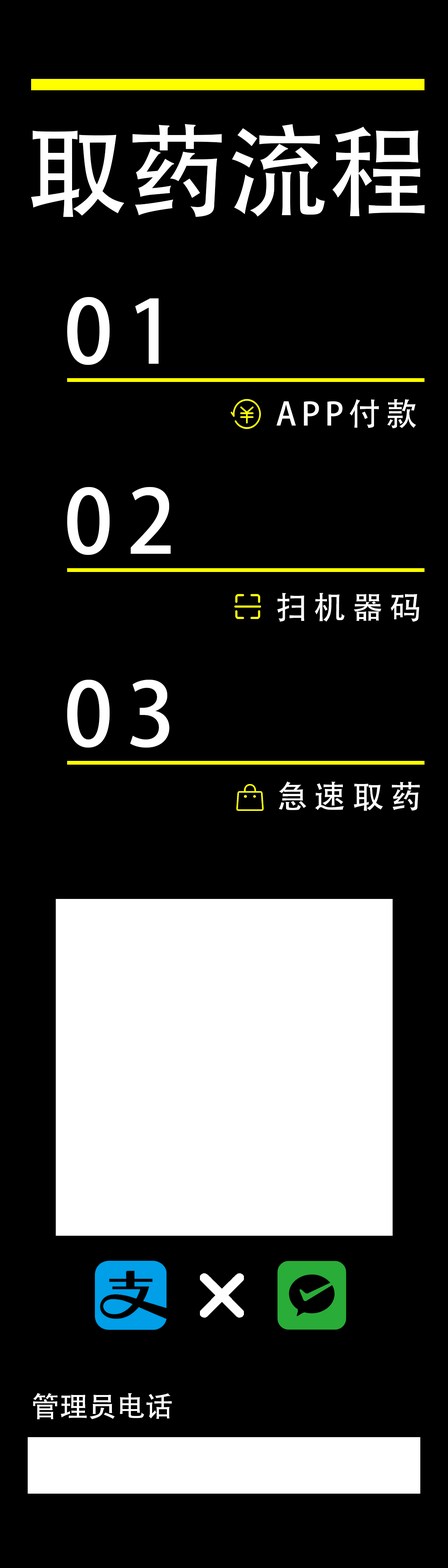
<style>
.page{position:relative;width:448px;height:1568px;background:#000000}
.page>*{position:absolute;margin:0}
.t1{font:101.1px "AdobeHeitiStd-Regular";color:#ffffff}
.t2{font:86.9px "AdobeHeitiStd-Regular";letter-spacing:0.16em;color:#ffffff}
.t3{font:31.6px "AdobeHeitiStd-Regular";letter-spacing:0.16em;color:#ffffff}
.t4{font:31.6px "AdobeHeitiStd-Regular";letter-spacing:0.2em;color:#ffffff}
.t5{font:28.4px "AdobeHeitiStd-Regular";color:#ffffff}
</style>
<div class="page">
<p class="t1" style="left:31px;top:124px;width:394px;height:93px">取药流程</p>
<p class="t2" style="left:67px;top:297px;width:92px;height:68px">01</p>
<p class="t3" style="left:277px;top:399px;width:139px;height:29px">APP付款</p>
<p class="t2" style="left:67px;top:487px;width:104px;height:68px">02</p>
<p class="t4" style="left:277px;top:593px;width:142px;height:29px">扫机器码</p>
<p class="t2" style="left:67px;top:680px;width:103px;height:68px">03</p>
<p class="t4" style="left:279px;top:781px;width:141px;height:30px">急速取药</p>
<p class="t5" style="left:33px;top:1393px;width:139px;height:26px">管理员电话</p>
</div>
